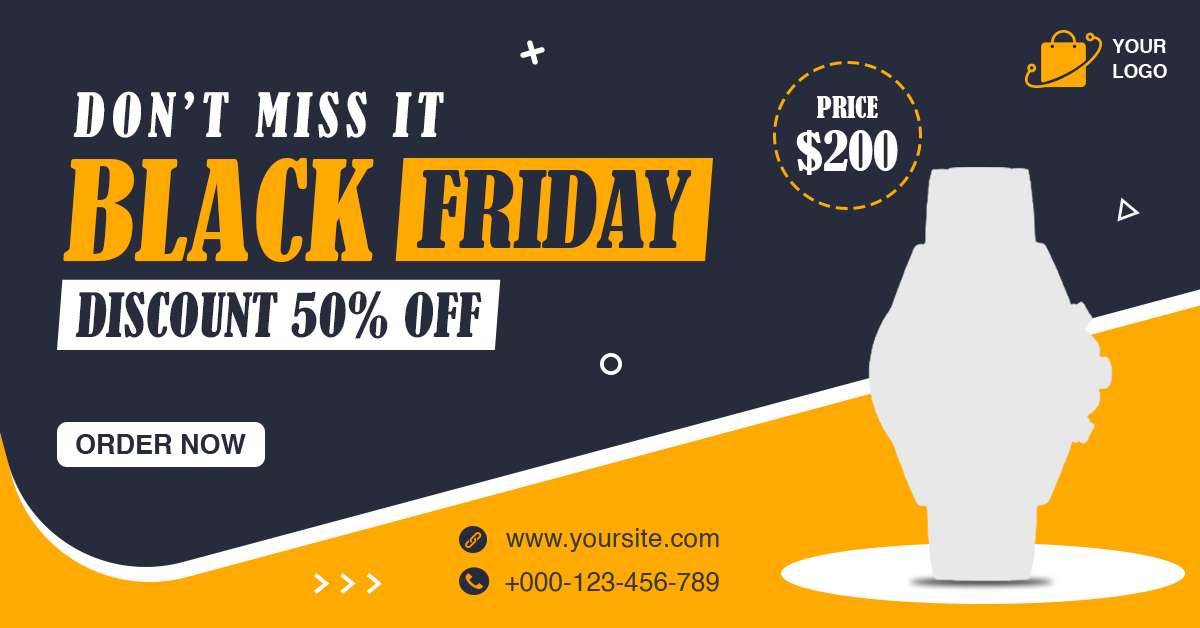
<style>
.page{position:relative;width:1200px;height:628px;background:#262c3c}
.page>*{position:absolute;margin:0}
.t1{font:18.8px/25px "Helvetica-Bold";color:#ffffff}
.t2{font:57px "BernardMT-Condensed";letter-spacing:0.11em;color:#ffffff}
.t3{font:27.9px "BernardMT-Condensed";color:#ffffff}
.t4{font:51.9px "BernardMT-Condensed";color:#ffffff}
.t5{font:130.8px "BernardMT-Condensed";color:#ffa903}
.t6{font:99.4px "BernardMT-Condensed";color:#262c3c}
.t7{font:57px "BernardMT-Condensed";color:#262c3c}
.t8{font:27px "Helvetica-Bold";color:#262c3c}
.t9{font:25.7px "Helvetica";letter-spacing:0.015em;color:#393939}
.t10{font:25.7px "Helvetica";color:#393939}
</style>
<div class="page">
<p class="t1" style="left:1112px;top:39px;width:55px;height:39px">YOUR <br>LOGO</p>
<p class="t2" style="left:73px;top:91px;width:371px;height:47px">DON’T MISS IT</p>
<p class="t3" style="left:817px;top:96px;width:61px;height:22px">PRICE</p>
<p class="t4" style="left:796px;top:130px;width:102px;height:45px">$200</p>
<p class="t5" style="left:63px;top:158px;width:311px;height:104px">BLACK</p>
<p class="t6" style="left:416px;top:170px;width:276px;height:78px">FRIDAY</p>
<p class="t7" style="left:75px;top:291px;width:407px;height:48px">DISCOUNT 50% OFF</p>
<p class="t8" style="left:76px;top:434px;width:170px;height:20px">ORDER NOW</p>
<p class="t9" style="left:506px;top:528px;width:213px;height:24px">www.yoursite.com</p>
<p class="t10" style="left:505px;top:572px;width:214px;height:20px">+000-123-456-789</p>
</div>
